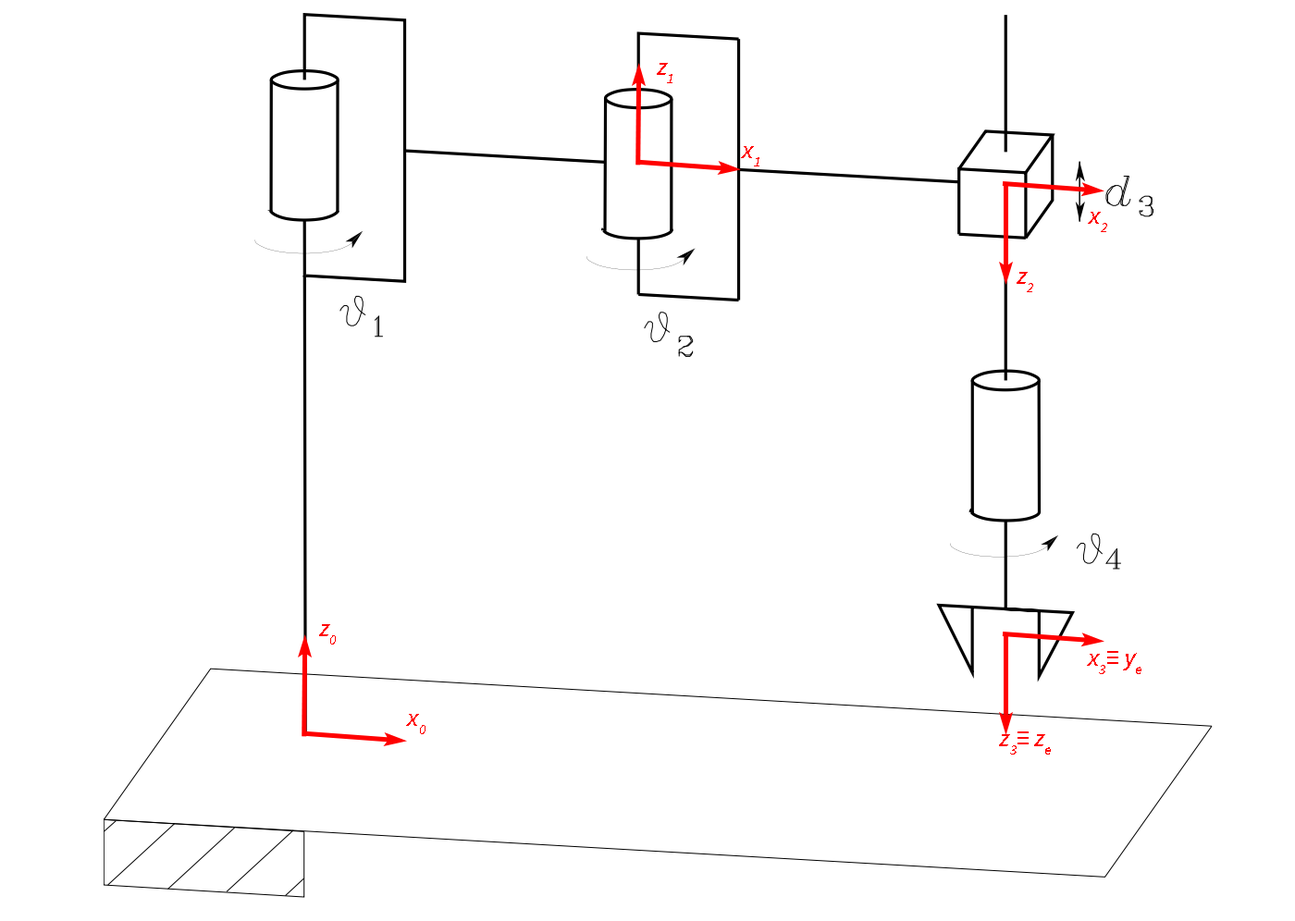
<style>
.page{position:relative;width:1295px;height:921px;background:#ffffff}
.page>*{position:absolute;margin:0}
.t1{font:24.7px "SourceSansItalic-SemiboldItalic";color:#ff0000}
</style>
<div class="page">
<p class="t1" style="left:657px;top:63px;width:15px;height:20px">z1</p>
<p class="t1" style="left:741px;top:146px;width:18px;height:20px">x1</p>
<p class="t1" style="left:1088px;top:212px;width:19px;height:20px">x2</p>
<p class="t1" style="left:1016px;top:272px;width:17px;height:20px">z2</p>
<p class="t1" style="left:319px;top:624px;width:17px;height:21px">z0</p>
<p class="t1" style="left:1087px;top:651px;width:54px;height:23px">x3≡ ye</p>
<p class="t1" style="left:406px;top:714px;width:19px;height:20px">x0</p>
<p class="t1" style="left:999px;top:731px;width:52px;height:24px">z3≡ ze</p>
</div>
